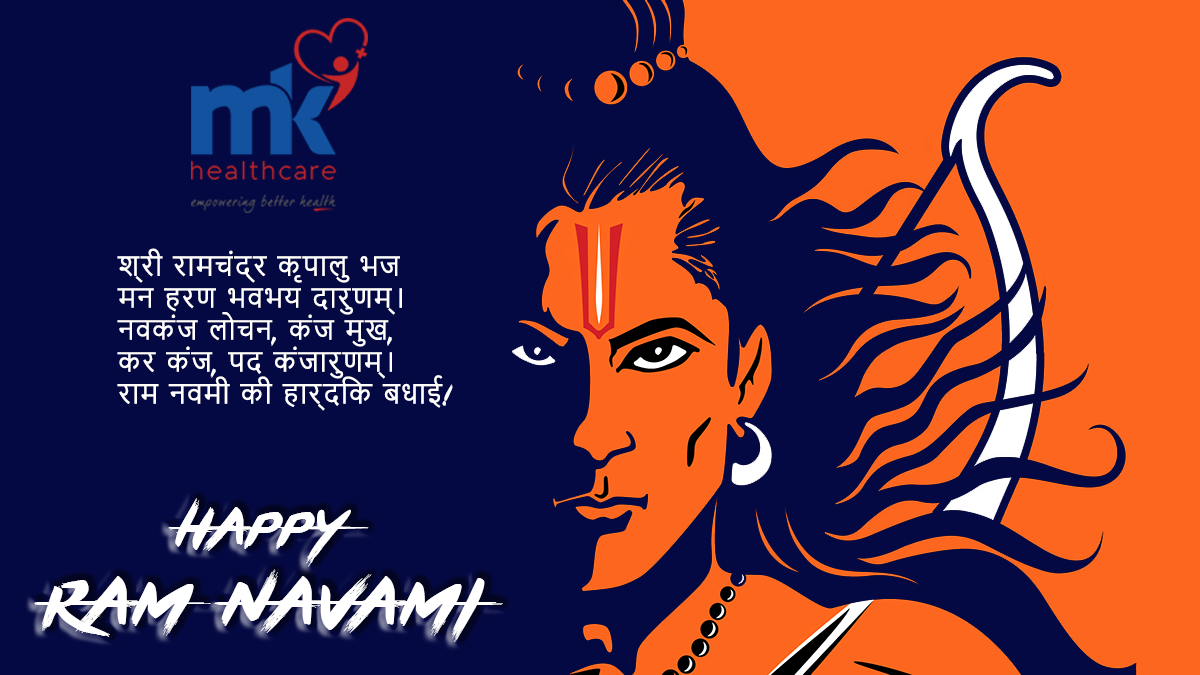
<style>
.page{position:relative;width:1200px;height:675px;background:#050943}
.page>*{position:absolute;margin:0}
.t1{font:26.6px "NirmalaUI";letter-spacing:0.04em;color:#ffffff}
.t2{font:26.6px "BRUSHSTRIKE";letter-spacing:0.04em;color:#ffffff}
.t3{font:68px "BRUSHSTRIKE";letter-spacing:0.04em;color:#ffffff}
.t4{font:87px "BRUSHSTRIKE";letter-spacing:0.04em;color:#ffffff}
</style>
<div class="page">
<p class="t1" style="left:117px;top:248px;width:336px;height:163px">श्री रामचंद्र कृपालु भज<br>मन हरण भवभय दारुणम्।<br>नवकंज लोचन<span class="t2">, </span>कंज मुख<span class="t2">,<br></span>कर कंज<span class="t2">, </span>पद कंजारुणम्।<br>राम नवमी की हार्दिक बधाई<span class="t2">!</span></p>
<p class="t3" style="left:168px;top:498px;width:201px;height:69px">HAPPY</p>
<p class="t4" style="left:34px;top:569px;width:469px;height:73px">RAM NAVAMI</p>
</div>
